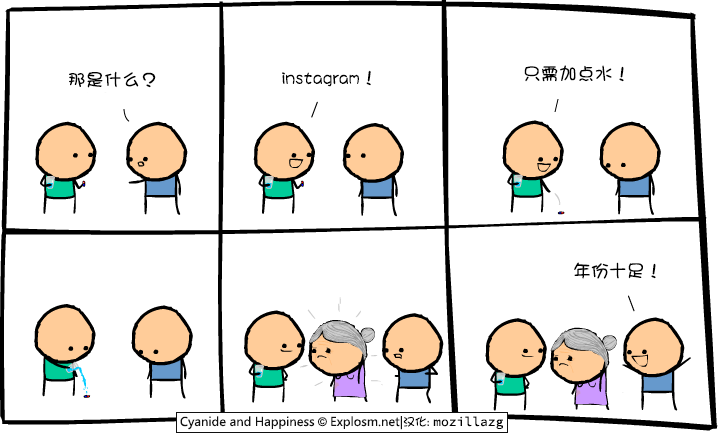
<style>
.page{position:relative;width:720px;height:440px;background:#ffffff}
.page>*{position:absolute;margin:0}
.t1{font:18px "DFGirl";color:#000000}
</style>
<div class="page">
<p class="t1" style="left:524px;top:65px;width:100px;height:17px">只需加点水！</p>
<p class="t1" style="left:69px;top:71px;width:87px;height:17px">那是什么？</p>
<p class="t1" style="left:282px;top:70px;width:89px;height:17px">instagram！</p>
<p class="t1" style="left:574px;top:262px;width:82px;height:17px">年份十足！</p>
</div>
